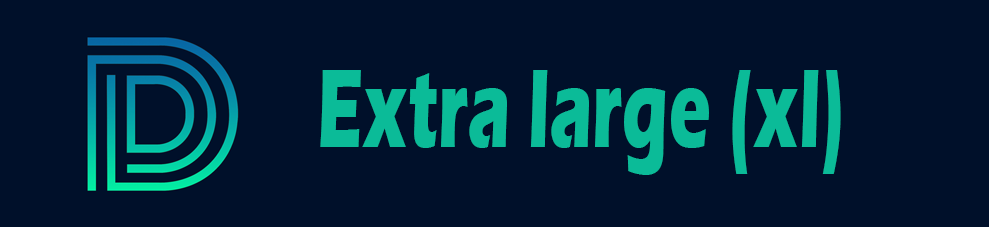
<style>
.page{position:relative;width:989px;height:227px;background:#00102a}
.page>*{position:absolute;margin:0}
.t1{font:116.4px "ErasITC-Bold";color:#0bbb98;scale:0.6 1}
</style>
<div class="page">
<p class="t1" style="left:320px;top:70px;width:521px;height:105px">Extra large (xl)</p>
</div>
